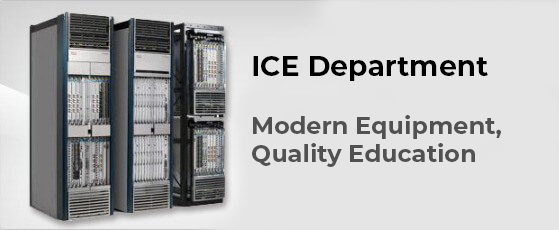
<style>
.page{position:relative;width:559px;height:230px;background:#e5e5e5}
.page>*{position:absolute;margin:0}
.t1{font:24px "Montserrat-Bold";color:#515151}
.t2{font:28px "Montserrat-Bold";color:#000000}
</style>
<div class="page">
<p class="t1" style="left:252px;top:56px;width:249px;height:111px"><span class="t2">ICE Department<br><br></span>Modern Equipment,<br>Quality Education</p>
</div>
